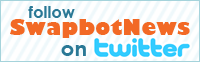
<style>
.page{position:relative;width:200px;height:62px;background:#ffffff}
.page>*{position:absolute;margin:0}
.t1{font:15.9px "CenturyGothic-Bold";letter-spacing:0.01em;color:#297895}
.t2{font:21px "GillSans-UltraBold";letter-spacing:0.01em;color:#f26925}
.t3{font:21px "CenturyGothic-Bold";letter-spacing:0.01em;color:#297895}
</style>
<div class="page">
<p class="t1" style="left:28px;top:6px;width:47px;height:12px">follow</p>
<p class="t2" style="left:10px;top:19px;width:180px;height:19px">SwapbotNews</p>
<p class="t3" style="left:61px;top:45px;width:25px;height:11px">on</p>
</div>
